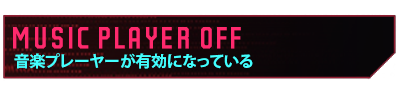
<style>
.page{position:relative;width:400px;height:95px;background:#ffffff}
.page>*{position:absolute;margin:0}
.t1{font:52.5px "Party-Lights-[WLM]-Flat";color:#ff296d}
.t2{font:15.7px "KozGoPr6N-Bold";color:#43ffff}
</style>
<div class="page">
<p class="t1" style="left:13px;top:27px;width:228px;height:22px">music player Off</p>
<p class="t2" style="left:14px;top:53px;width:239px;height:16px">音楽プレーヤーが有効になっている</p>
</div>
